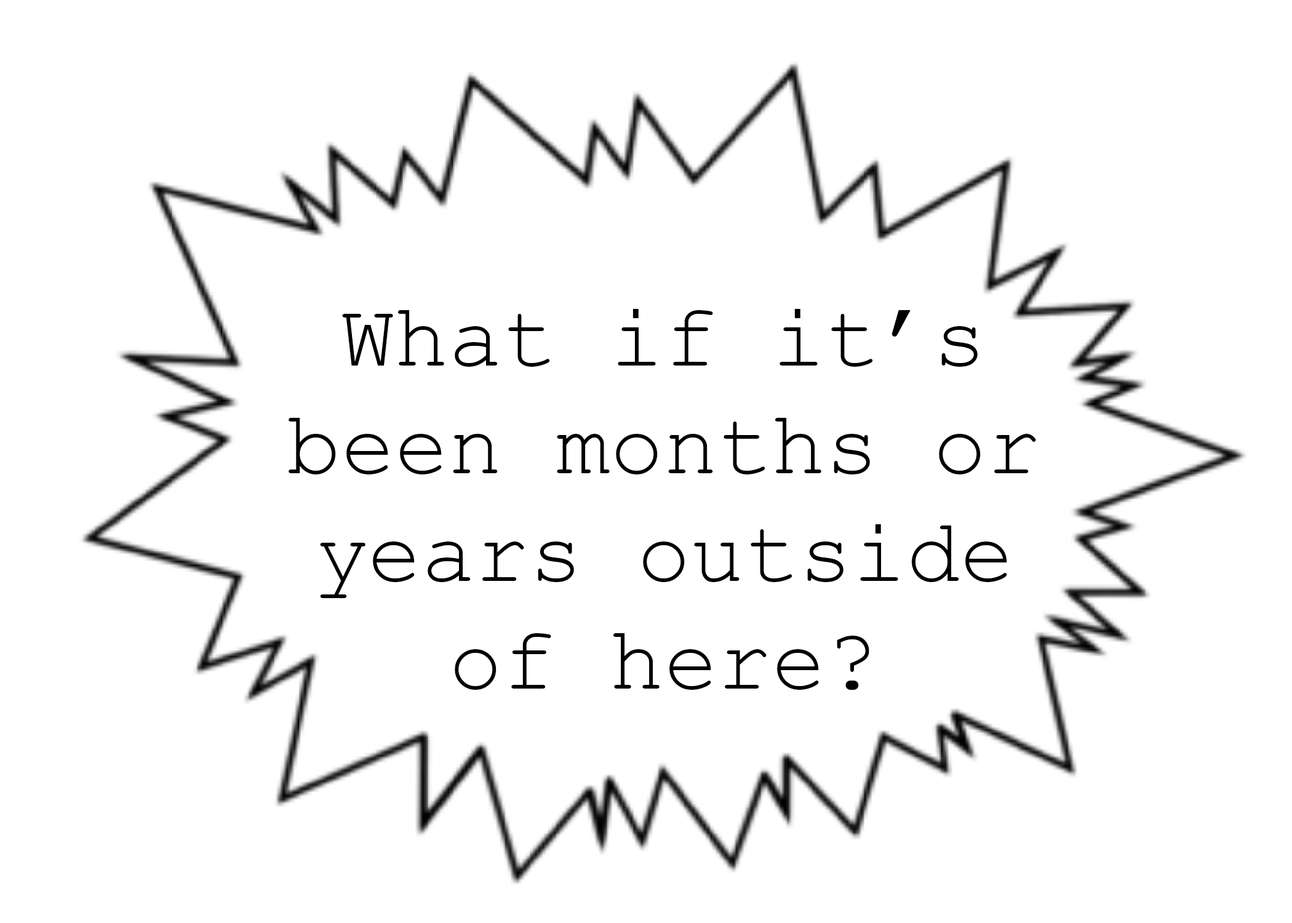
<style>
.page{position:relative;width:1292px;height:923px;background:#ffffff}
.page>*{position:absolute;margin:0}
.t1{font:89.7px "CourierNewPSMT";color:#000000}
</style>
<div class="page">
<p class="t1" style="left:289px;top:309px;width:747px;height:381px;text-align:center">What if it’s been months or years outside of here?</p>
</div>
